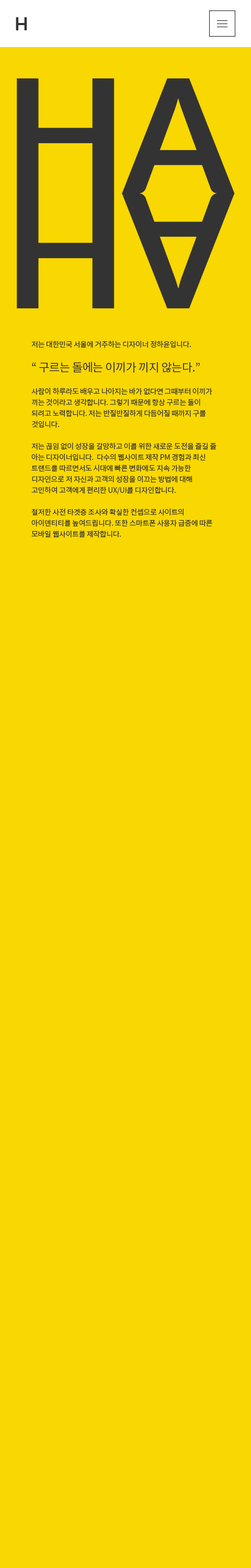
<style>
.page{position:relative;width:251px;height:1568px;background:#f9d700}
.page>*{position:absolute;margin:0}
.t1{font:17.8px "Lato-Bold";color:#333333}
.t2{font:7.3px "NotoSansCJKkr-Regular";letter-spacing:-0.025em;color:#333333}
.t3{font:11.5px "NotoSansCJKkr-Regular";letter-spacing:-0.025em;color:#333333}
</style>
<div class="page">
<p class="t1" style="left:16px;top:17px;width:11px;height:13px">H</p>
<p class="t2" style="left:31px;top:341px;width:160px;height:7px">저는 대한민국 서울에 거주하는 디자이너 정하윤입니다.</p>
<p class="t3" style="left:32px;top:362px;width:168px;height:11px">“ 구르는 돌에는 이끼가 끼지 않는다.”</p>
<p class="t2" style="left:31px;top:388px;width:185px;height:150px">사람이 하루라도 배우고 나아지는 바가 없다면 그때부터 이끼가 끼는 것이라고 생각합니다. 그렇기 때문에 항상 구르는 돌이 되려고 노력합니다. 저는 반질반질하게 다듬어질 때까지 구를 것입니다. <br>저는 끊임 없이 성장을 갈망하고 이를 위한 새로운 도전을 즐길 줄 아는 디자이너입니다.  다수의 웹사이트 제작 PM 경험과 최신 트랜드를 따르면서도 시대에 빠른 변화에도 지속 가능한 디자인으로 저 자신과 고객의 성장을 이끄는 방법에 대해 고민하여 고객에게 편리한 UX/UI를 디자인합니다. <br>철저한 사전 타겟층 조사와 확실한 컨셉으로 사이트의 아이덴티티를 높여드립니다. 또한 스마트폰 사용자 급증에 따른 모바일 웹사이트를 제작합니다.</p>
</div>
